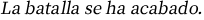
<style>
.page{position:relative;width:204px;height:20px;background:#ffffff}
.page>*{position:absolute;margin:0}
.t1{font:20px "OfficialFateFont-Medium";color:#000000;font-style:italic}
</style>
<div class="page">
<p class="t1" style="left:0px;top:0px;width:202px;height:15px">La batalla se ha acabado.</p>
</div>
